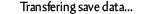
<style>
.page{position:relative;width:154px;height:14px;background:#ffffff}
.page>*{position:absolute;margin:0}
.t1{font:13.2px "Amira-Roman";color:#000000;scale:0.91 1}
</style>
<div class="page">
<p class="t1" style="left:20px;top:1px;width:113px;height:13px">Transfering save data…</p>
</div>
